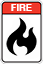
<style>
.page{position:relative;width:43px;height:64px;background:#ffffff}
.page>*{position:absolute;margin:0}
.t1{font:9.3px "Helvetica-Bold";color:#ffffff}
</style>
<div class="page">
<p class="t1" style="left:11px;top:4px;width:21px;height:7px">FIRE</p>
</div>
